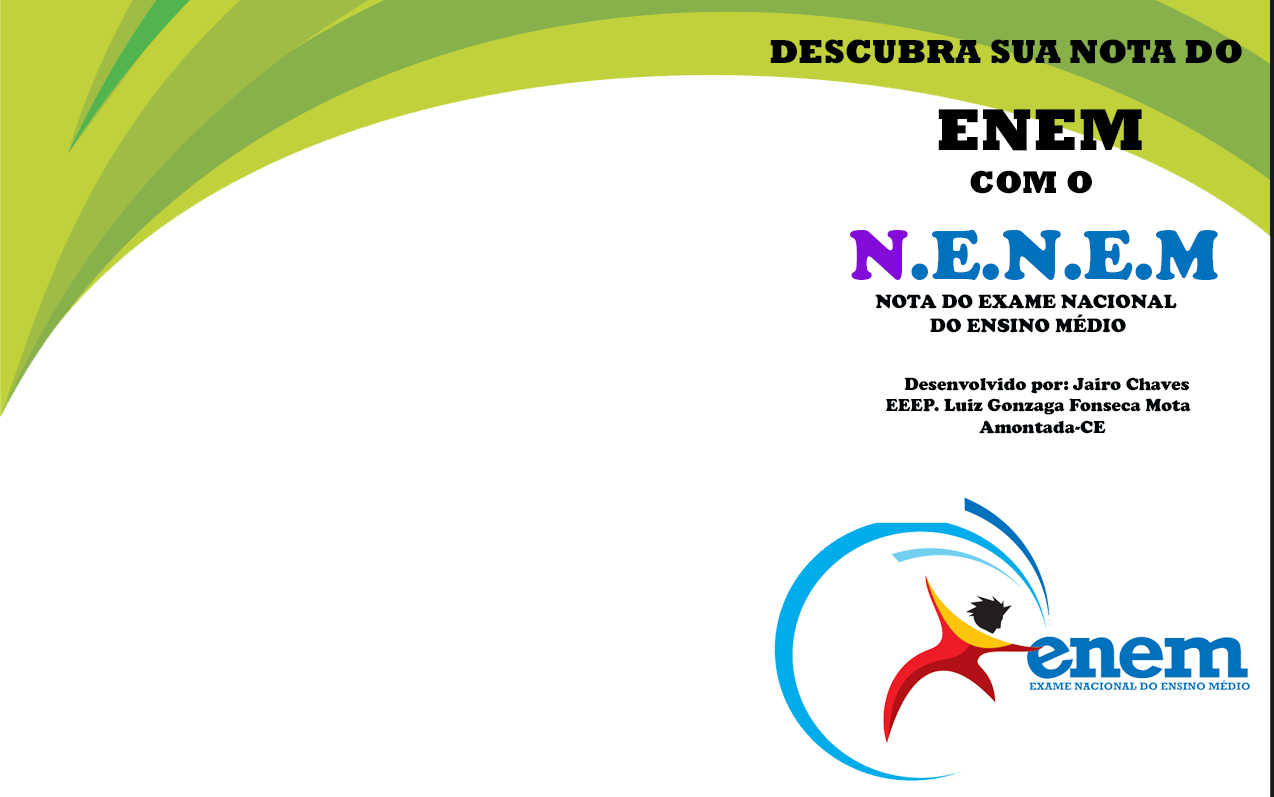
<style>
.page{position:relative;width:1274px;height:797px;background:#ffffff}
.page>*{position:absolute;margin:0}
.t1{font:18px "CooperBlack";color:#000406}
.t2{font:34px "Rockwell-ExtraBold";color:#000202}
.t3{font:60px "Rockwell-ExtraBold";color:#000202}
.t4{font:32px "Rockwell-ExtraBold";color:#000202}
.t5{font:72px "CooperBlack";color:#840cd8}
.t6{font:72px "CooperBlack";color:#0071bc}
.t7{font:20px "CooperBlack";color:#000406}
</style>
<div class="page">
<p class="t1" style="left:770px;top:39px;width:472px;height:395px;text-align:center"><span class="t2">DESCUBRA SUA NOTA DO <br>   </span><span class="t3">ENEM<br>     </span><span class="t4">COM O <br>   </span><span class="t5">N</span><span class="t6">.E.N.E.M<br>     </span><span class="t7">NOTA DO EXAME NACIONAL <br>      DO ENSINO MÉDIO<br> <br>            </span>Desenvolvido por: Jairo Chaves <br>           EEEP. Luiz Gonzaga Fonseca Mota<br>             Amontada-CE</p>
</div>
